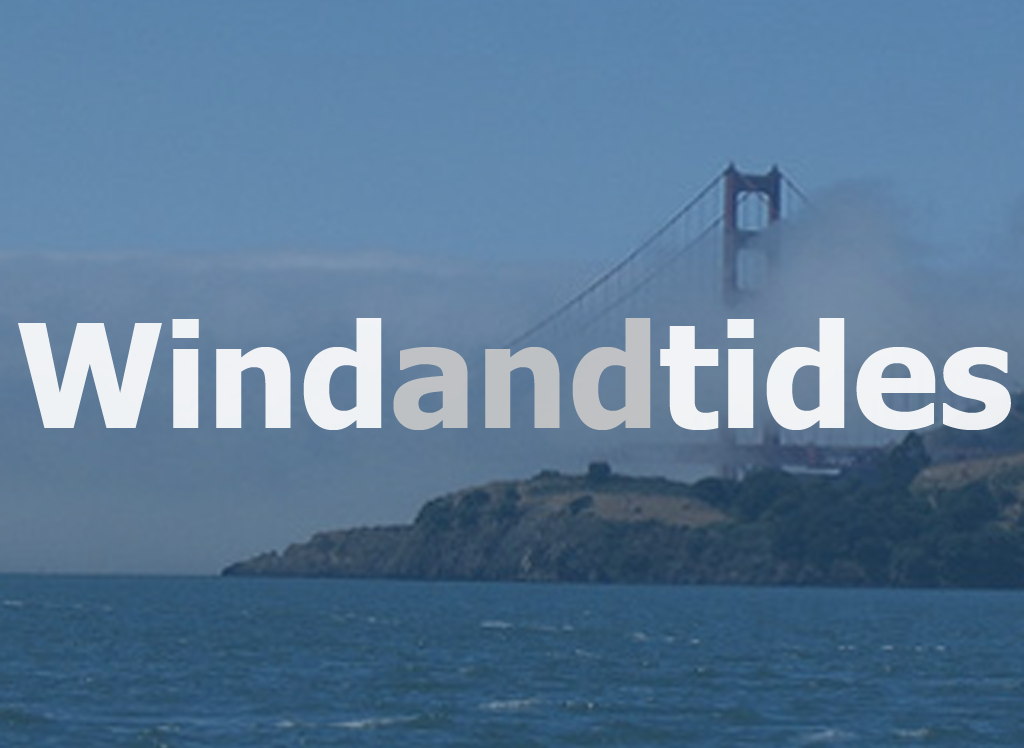
<style>
.page{position:relative;width:1024px;height:748px}
.page>*{position:absolute;margin:0}
.t1{font:144px "Tahoma-Bold";color:#ffffff}
.t2{font:144px "Tahoma-Bold";color:#fefefe}
.t3{font:144px "Tahoma-Bold";color:#c8c8c8}
</style>
<div class="page">
<p class="t1" style="left:18px;top:318px;width:993px;height:112px;opacity:0.91"><span class="t2">Wind</span><span class="t3">and</span>tides</p>
</div>
